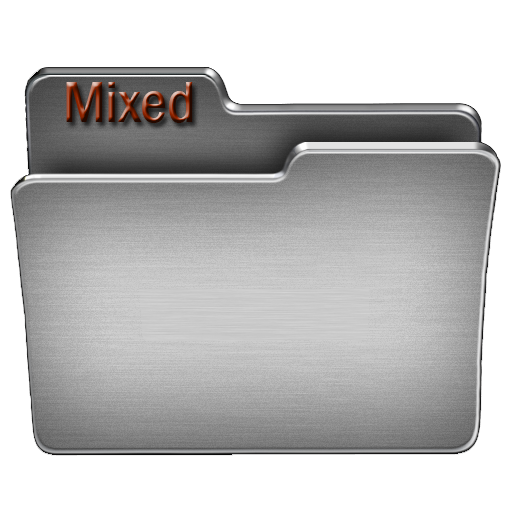
<style>
.page{position:relative;width:512px;height:512px;background:#ffffff}
.page>*{position:absolute;margin:0}
.t1{font:60px "FranklinGothic-MediumCond"}
</style>
<div class="page">
<p class="t1" style="left:66px;top:82px;width:127px;height:41px">Mixed</p>
</div>
